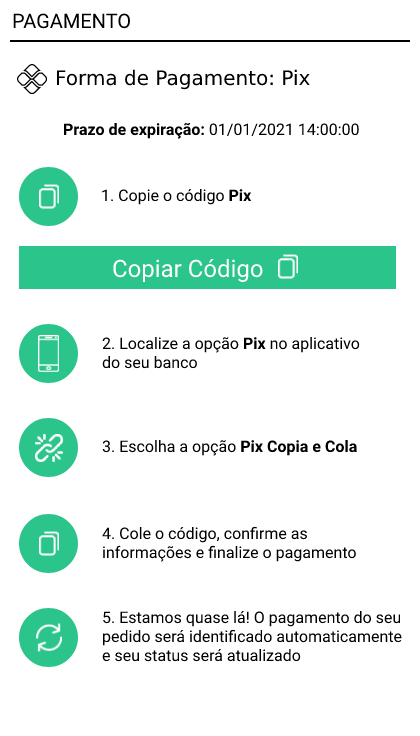
<style>
.page{position:relative;width:420px;height:736px;background:#ffffff}
.page>*{position:absolute;margin:0}
.t1{font:20px "Roboto-Regular";color:#000000}
.t2{font:20px "DejaVuSans";color:#000000}
.t3{font:16px "Roboto-Bold";color:#000000}
.t4{font:16px "Roboto-Regular";color:#000000}
.t5{font:24px "Roboto-Regular";color:#ffffff}
</style>
<div class="page">
<p class="t1" style="left:13px;top:13px;width:117px;height:16px">PAGAMENTO</p>
<p class="t2" style="left:56px;top:69px;width:254px;height:21px">Forma de Pagamento: Pix</p>
<p class="t3" style="left:64px;top:123px;width:295px;height:16px">Prazo de expiração:<span class="t4"> 01/01/2021 14:00:00</span></p>
<p class="t4" style="left:102px;top:189px;width:150px;height:16px">1. Copie o código <span class="t3">Pix</span></p>
<p class="t5" style="left:113px;top:259px;width:150px;height:23px">Copiar Código</p>
<p class="t4" style="left:102px;top:337px;width:258px;height:32px">2. Localize a opção <span class="t3">Pix </span>no aplicativo <br>do seu banco</p>
<p class="t4" style="left:102px;top:440px;width:255px;height:16px">3. Escolha a opção <span class="t3">Pix Copia e Cola</span></p>
<p class="t4" style="left:102px;top:526px;width:254px;height:36px">4. Cole o código, confirme as <br>informações e finalize o pagamento</p>
<p class="t4" style="left:102px;top:611px;width:300px;height:51px">5. Estamos quase lá! O pagamento do seu<br>pedido será identificado automaticamente <br>e seu status será atualizado</p>
</div>
